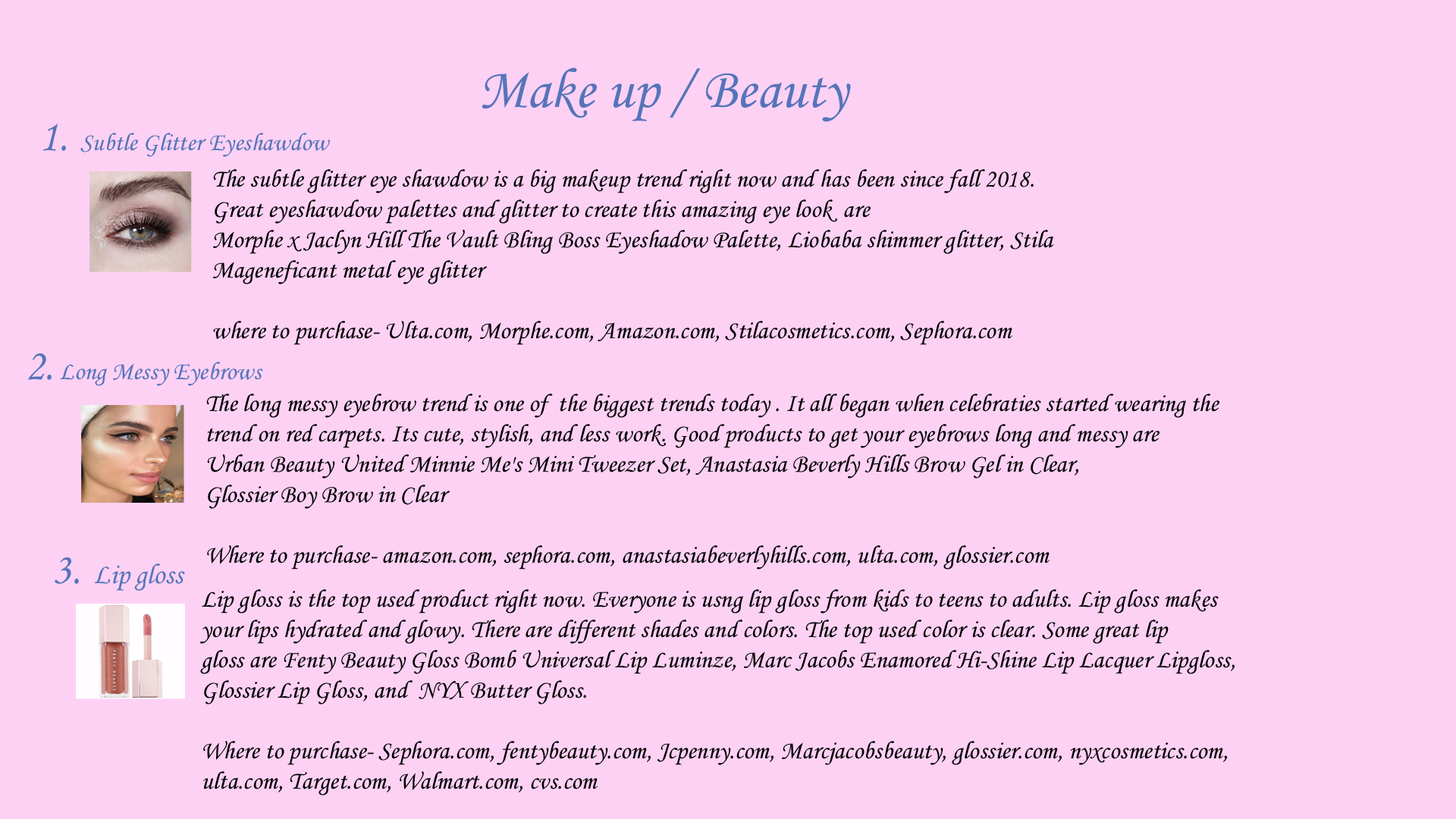
<style>
.page{position:relative;width:1456px;height:819px;background:#fdd1f4}
.page>*{position:absolute;margin:0}
.t1{font:56.9px "MonotypeCorsiva";color:#5674b9}
.t2{font:25.3px "MonotypeCorsiva";color:#5674b9}
.t3{font:44.2px "MonotypeCorsiva";color:#5674b9}
.t4{font:25.3px "MonotypeCorsiva";color:#000000}
.t5{font:28.4px "MonotypeCorsiva";color:#5674b9}
</style>
<div class="page">
<p class="t1" style="left:482px;top:67px;width:369px;height:55px">Make up / Beauty</p>
<p class="t2" style="left:43px;top:124px;width:287px;height:33px"><span class="t3">1. </span>Subtle Glitter Eyeshawdow</p>
<p class="t4" style="left:213px;top:169px;width:841px;height:176px">The subtle glitter eye shawdow is a big makeup trend right now and has been since fall 2018.<br>Great eyeshawdow palettes and glitter to create this amazing eye look  are <br>Morphe x Jaclyn Hill The Vault Bling Boss Eyeshadow Palette, Liobaba shimmer glitter, Stila <br>Mageneficant metal eye glitter<br><br>where to purchase- Ulta.com, Morphe.com, Amazon.com, Stilacosmetics.com, Sephora.com</p>
<p class="t2" style="left:28px;top:353px;width:235px;height:33px"><span class="t3">2.</span> Long Messy Eyebrows</p>
<p class="t4" style="left:206px;top:394px;width:1013px;height:176px">The long messy eyebrow trend is one of  the biggest trends today . It all began when celebraties started wearing the<br>trend on red carpets. Its cute, stylish, and less work. Good products to get your eyebrows long and messy are <br>Urban Beauty United Minnie Me's Mini Tweezer Set, Anastasia Beverly Hills Brow Gel in Clear, <br>Glossier Boy Brow in Clear<br><br>Where to purchase- amazon.com, sephora.com, anastasiabeverlyhills.com, ulta.com, glossier.com</p>
<p class="t5" style="left:55px;top:557px;width:130px;height:34px"><span class="t3">3. </span>Lip gloss</p>
<p class="t4" style="left:200px;top:589px;width:1035px;height:206px">Lip gloss is the top used product right now. Everyone is usng lip gloss from kids to teens to adults. Lip gloss makes<br>your lips hydrated and glowy. There are different shades and colors. The top used color is clear. Some great lip <br>gloss are Fenty Beauty Gloss Bomb Universal Lip Luminze, Marc Jacobs Enamored Hi-Shine Lip Lacquer Lipgloss,<br>Glossier Lip Gloss, and  NYX Butter Gloss. <br><br>Where to purchase- Sephora.com, fentybeauty.com, Jcpenny.com, Marcjacobsbeauty, glossier.com, nyxcosmetics.com, <br>ulta.com, Target.com, Walmart.com, cvs.com</p>
</div>
